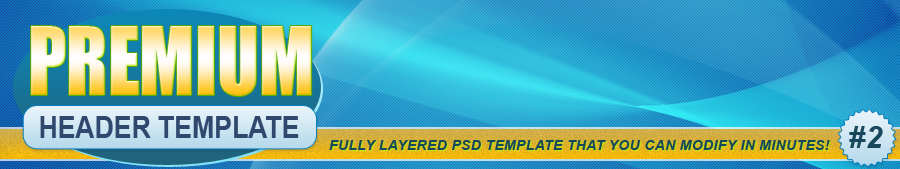
<style>
.page{position:relative;width:900px;height:169px}
.page>*{position:absolute;margin:0}
.t1{font:86.7px "Impact";text-transform:uppercase;scale:0.89 1}
.t2{font:30px "Arial-BoldMT";color:#30476e;text-transform:uppercase;scale:0.89 1}
.t3{font:30.4px "Arial-BoldItalicMT";letter-spacing:0.025em;color:#16475a;text-transform:uppercase}
.t4{font:14px "Arial-BoldItalicMT";letter-spacing:0.025em;color:#16475a;text-transform:uppercase}
</style>
<div class="page">
<p class="t1" style="left:31px;top:26px;width:281px;height:70px">Premium</p>
<p class="t2" style="left:40px;top:116px;width:259px;height:22px">Header Template</p>
<p class="t3" style="left:849px;top:126px;width:34px;height:22px">#2</p>
<p class="t4" style="left:329px;top:140px;width:501px;height:10px">Fully Layered PSD Template That You Can Modify In Minutes!</p>
</div>
